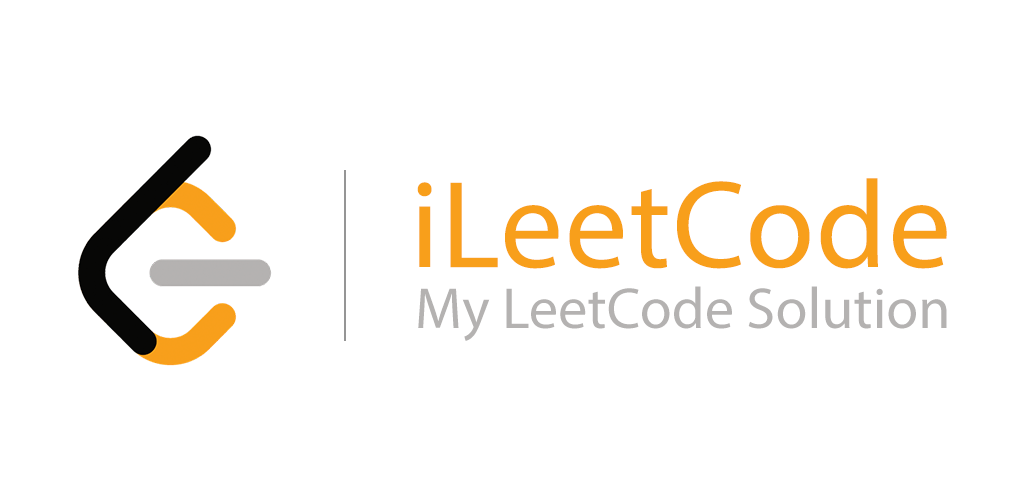
<style>
.page{position:relative;width:1024px;height:500px;background:#ffffff}
.page>*{position:absolute;margin:0}
.t1{font:125px "MyriadPro-Regular";letter-spacing:0.015em;color:#f89f1b}
.t2{font:58.3px "MyriadPro-Regular";color:#b4b2b1}
</style>
<div class="page">
<p class="t1" style="left:417px;top:178px;width:530px;height:91px">iLeetCode</p>
<p class="t2" style="left:418px;top:286px;width:529px;height:55px">My LeetCode Solution</p>
</div>
